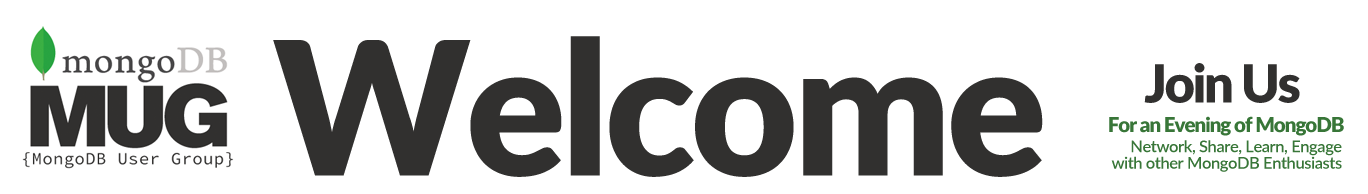
<style>
.page{position:relative;width:1368px;height:194px;background:#ffffff}
.page>*{position:absolute;margin:0}
.t1{font:185.5px "Lato-Black";letter-spacing:-0.025em;color:#31302f}
.t2{font:52.6px "Lato-Black";letter-spacing:-0.05em;color:#31302f}
.t3{font:20.5px "Lato-Black";letter-spacing:-0.05em;color:#387638}
.t4{font:16.5px/16.5px "Lato-Semibold";letter-spacing:-0.025em;color:#387638}
</style>
<div class="page">
<p class="t1" style="left:273px;top:36px;width:770px;height:141px">Welcome</p>
<p class="t2" style="left:1144px;top:63px;width:156px;height:40px">Join Us</p>
<p class="t3" style="left:1109px;top:116px;width:235px;height:20px">For an Evening of MongoDB</p>
<p class="t4" style="left:1111px;top:140px;width:231px;height:32px;text-align:right">Network, Share, Learn, Engage<br>with other MongoDB Enthusiasts</p>
</div>
